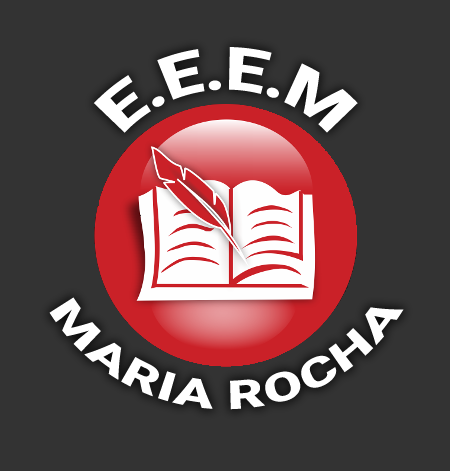
<style>
.page{position:relative;width:450px;height:471px;background:#333333}
.page>*{position:absolute;margin:0}
.t1{font:60px "Roboto-Black";color:#ffffff}
.t2{font:40px "Roboto-Black";color:#ffffff}
</style>
<div class="page">
<p class="t1" style="left:93px;top:46px;width:265px;height:87px">E.E.E.M</p>
<p class="t2" style="left:49px;top:297px;width:355px;height:113px">MARIA ROCHA</p>
</div>
